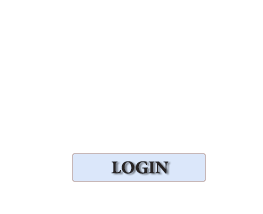
<style>
.page{position:relative;width:263px;height:214px;background:#ffffff}
.page>*{position:absolute;margin:0}
.t1{font:18px "MinionPro-Bold";color:#262222}
</style>
<div class="page">
<p class="t1" style="left:111px;top:161px;width:58px;height:13px">LOGIN</p>
</div>
